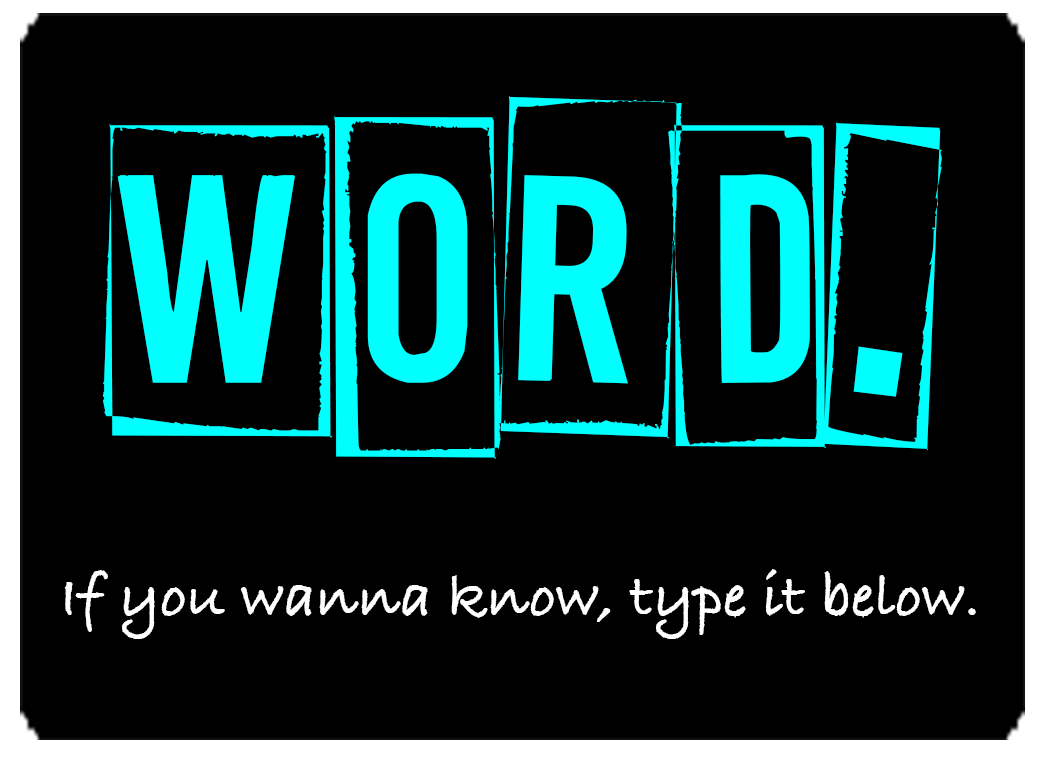
<style>
.page{position:relative;width:1042px;height:764px;background:#000000}
.page>*{position:absolute;margin:0}
.t1{font:416.7px "ABoxFor2";color:#00ffff}
.t2{font:62.5px "BradleyHandITCTT-Bold";color:#ffffff}
</style>
<div class="page">
<p class="t1" style="left:103px;top:95px;width:839px;height:364px">WORD.</p>
<p class="t2" style="left:64px;top:569px;width:912px;height:70px">If you wanna know, type it below.</p>
</div>
